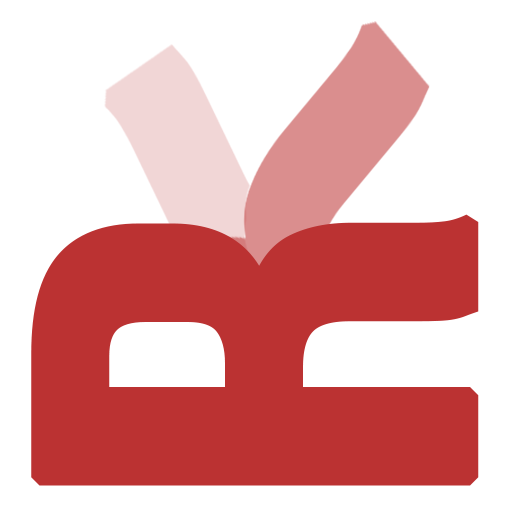
<style>
.page{position:relative;width:512px;height:512px;background:#ffffff}
.page>*{position:absolute;margin:0}
.t1{font:615px "BebasNeue";letter-spacing:0.06em;color:#bb3232;font-weight:bold;scale:1.21 1}
</style>
<div class="page">
<p class="t1" style="left:31px;top:214px;width:448px;height:272px;rotate:-90deg">R</p>
</div>
